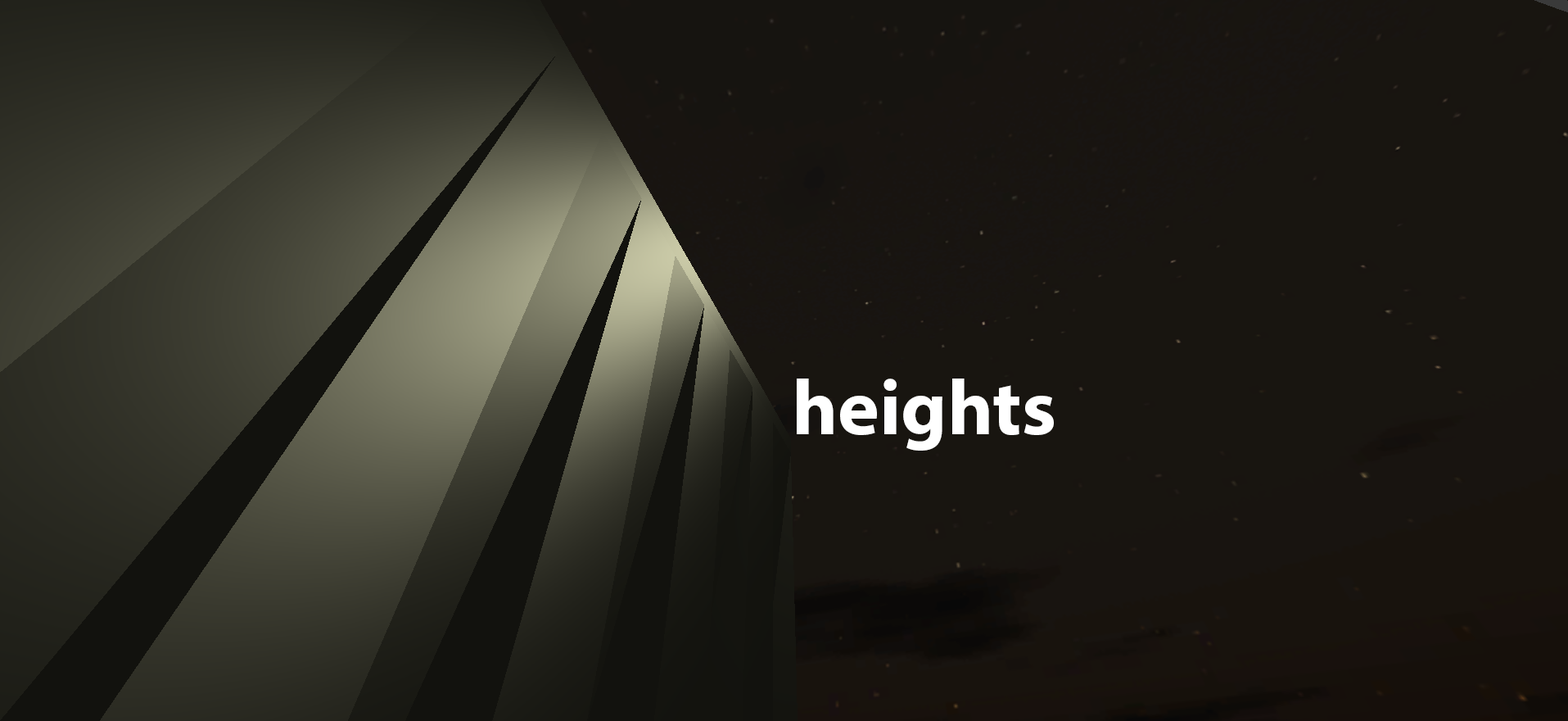
<style>
.page{position:relative;width:1568px;height:721px;background:#181510}
.page>*{position:absolute;margin:0}
.t1{font:78.6px "MyriadPro-Bold";color:#ffffff}
</style>
<div class="page">
<p class="t1" style="left:797px;top:378px;width:257px;height:72px">heights</p>
</div>
